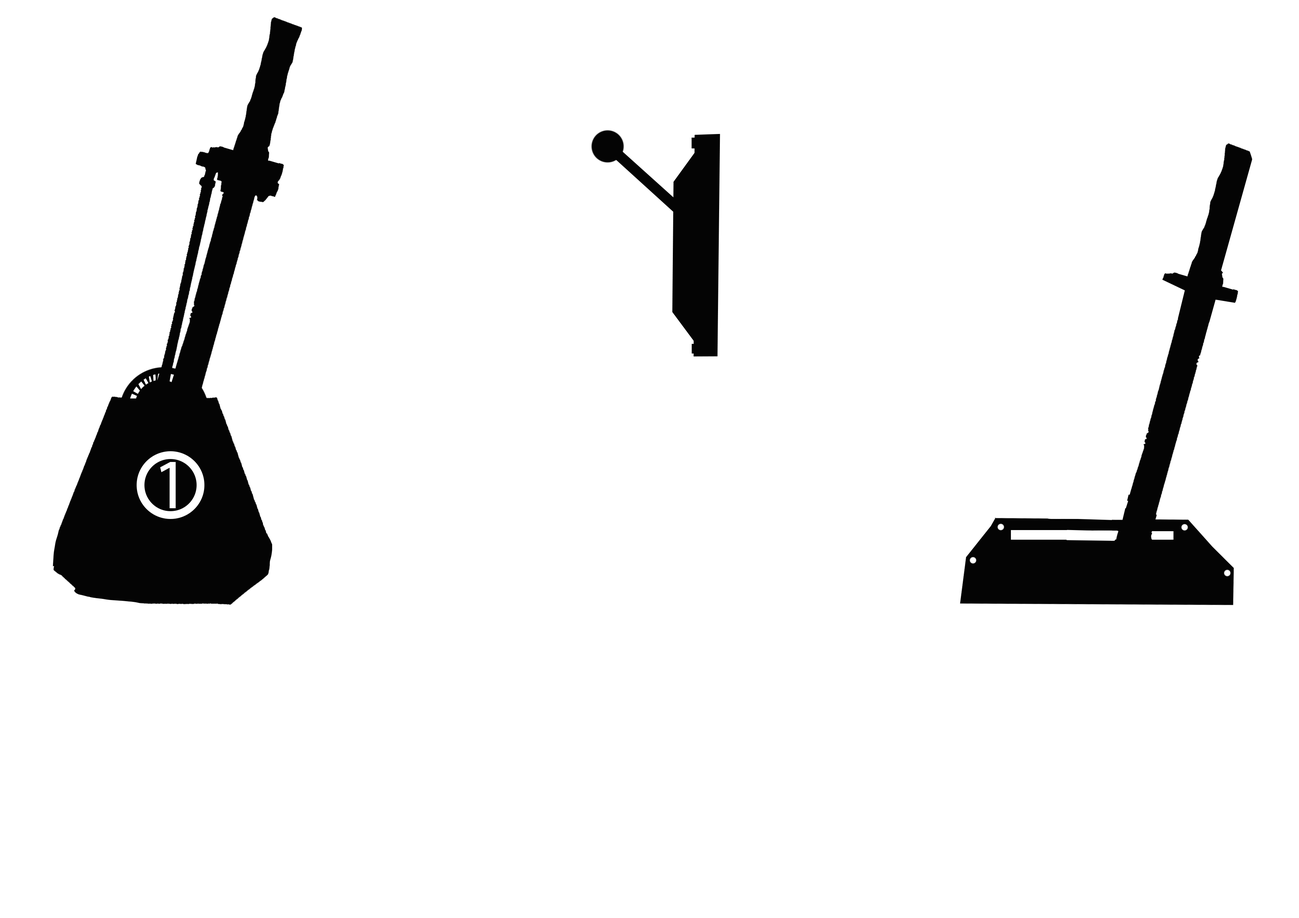
<style>
.page{position:relative;width:1299px;height:918px;background:#ffffff}
.page>*{position:absolute;margin:0}
.t1{font:71px "MyriadPro-Regular";color:#ffffff}
</style>
<div class="page">
<p class="t1" style="left:160px;top:462px;width:16px;height:46px">1</p>
</div>
